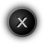
<style>
.page{position:relative;width:44px;height:44px}
.page>*{position:absolute;margin:0}
.t1{font:12.8px "Futura-Medium";color:#c6c6c6;scale:1.41 1}
</style>
<div class="page">
<p class="t1" style="left:16px;top:17px;width:12px;height:11px">X</p>
</div>
